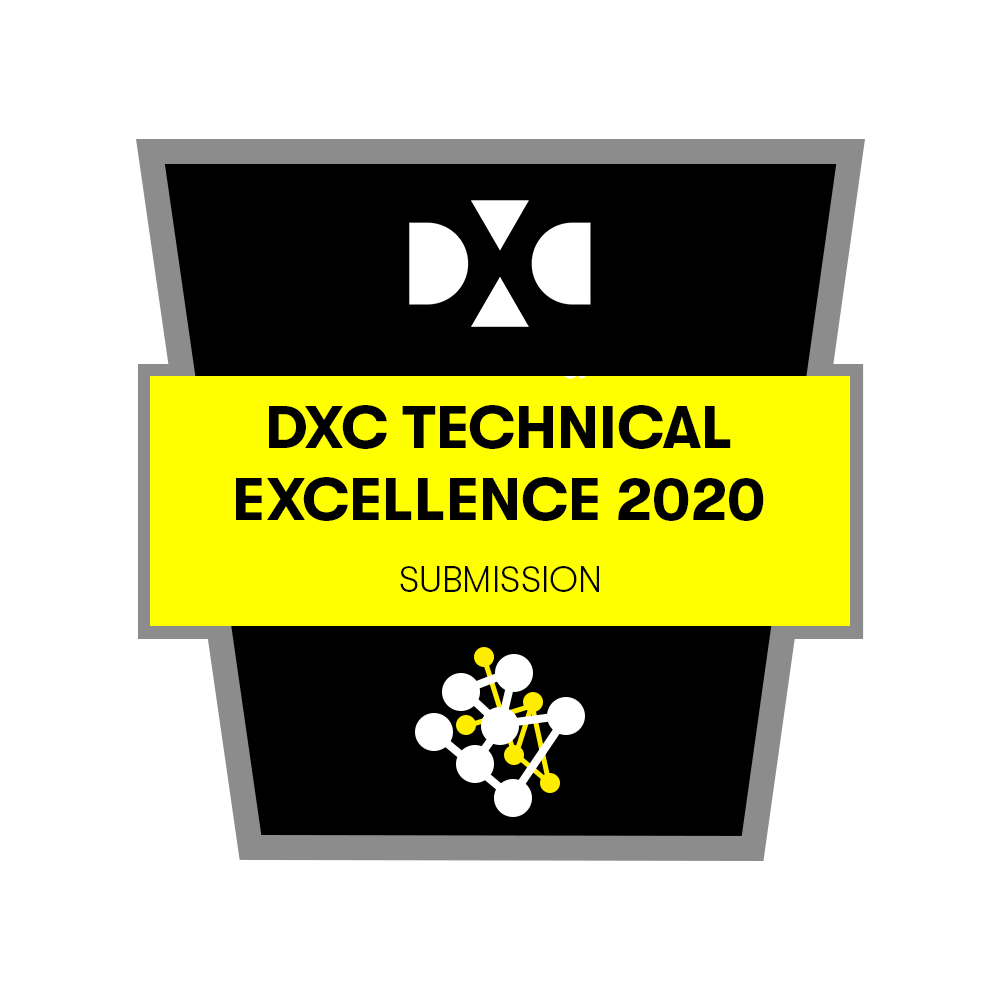
<style>
.page{position:relative;width:1000px;height:1000px;background:#ffffff}
.page>*{position:absolute;margin:0}
.t1{font:60px "GTWalsheimPro-Bold";color:#000000}
.t2{font:36px "GTWalsheimPro-Light";color:#000000}
</style>
<div class="page">
<p class="t1" style="left:236px;top:405px;width:528px;height:116px;text-align:center">DXC TECHNICAL<br>EXCELLENCE 2020</p>
<p class="t2" style="left:400px;top:566px;width:199px;height:26px">SUBMISSION</p>
</div>
